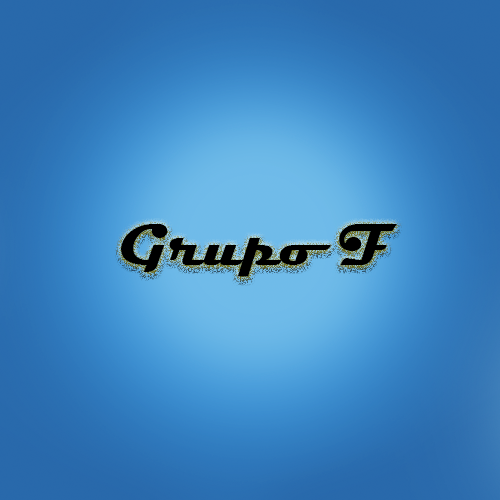
<style>
.page{position:relative;width:500px;height:500px}
.page>*{position:absolute;margin:0}
.t1{font:60px "Magneto-Bold";color:#000000}
</style>
<div class="page">
<p class="t1" style="left:121px;top:224px;width:276px;height:53px">Grupo F</p>
</div>
